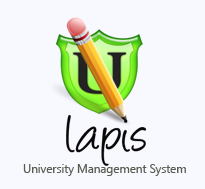
<style>
.page{position:relative;width:205px;height:189px;background:#f8f8ff}
.page>*{position:absolute;margin:0}
.t1{font:60.4px "Angelina";letter-spacing:-0.025em;color:#070707}
.t2{font:12px "SegoeUI";letter-spacing:-0.01em;color:#585c50}
</style>
<div class="page">
<p class="t1" style="left:66px;top:115px;width:80px;height:51px">lapis</p>
<p class="t2" style="left:23px;top:164px;width:163px;height:12px">University Management System</p>
</div>
